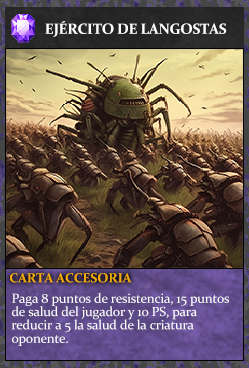
<style>
.page{position:relative;width:249px;height:368px}
.page>*{position:absolute;margin:0}
.t1{font:14.7px "Constantia-Bold";letter-spacing:-0.02em;color:#ffffff}
.t2{font:13.3px "Constantia-Bold";letter-spacing:-0.02em;color:#f2ac05}
.t3{font:13.3px/13.3px "Constantia";letter-spacing:-0.02em;color:#ffffff}
</style>
<div class="page">
<p class="t1" style="left:45px;top:21px;width:182px;height:16px">EJÉRCITO DE LANGOSTAS</p>
<p class="t2" style="left:10px;top:273px;width:122px;height:10px">CARTA ACCESORIA</p>
<p class="t3" style="left:12px;top:293px;width:217px;height:53px">Paga 8 puntos de resistencia, 15 puntos<br>de salud del jugador y 10 PS, para<br>reducir a 5 la salud de la criatura<br>oponente.</p>
</div>
